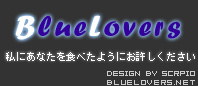
<style>
.page{position:relative;width:198px;height:86px;background:#333333}
.page>*{position:absolute;margin:0}
.t1{font:30px "ForteMT";letter-spacing:0.1em;color:#330099}
.t2{font:30px "ForteMT";letter-spacing:0.1em;color:#ffffff}
.t3{font:10px "MS-Gothic";color:#ffffff}
.t4{font:8px "04b08";letter-spacing:0.01em;color:#cccccc}
.t5{font:8px "04b08";letter-spacing:0.08em;color:#cccccc}
</style>
<div class="page">
<p class="t1" style="left:15px;top:15px;width:165px;height:25px"><span class="t2">B</span>lue<span class="t2">L</span>overs</p>
<p class="t3" style="left:6px;top:52px;width:189px;height:9px">私にあなたを食べたようにお許しください</p>
<p class="t4" style="left:107px;top:71px;width:88px;height:5px">DESIGN BY SCRPIO</p>
<p class="t5" style="left:107px;top:80px;width:88px;height:5px">BLUELOVERS.NET</p>
</div>
